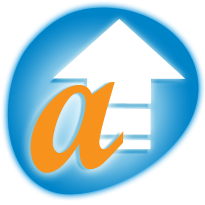
<style>
.page{position:relative;width:205px;height:205px;background:#ffffff}
.page>*{position:absolute;margin:0}
.t1{font:200px "WrexhamScript";color:#f7931d;scale:0.88 1}
</style>
<div class="page">
<p class="t1" style="left:30px;top:82px;width:94px;height:91px;rotate:-5deg">a</p>
</div>
